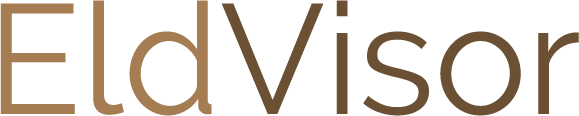
<style>
.page{position:relative;width:579px;height:116px;background:#ffffff}
.page>*{position:absolute;margin:0}
.t1{font:155px "Raleway-Regular";color:#6c5034}
.t2{font:155px "Raleway-Regular";color:#a67c52}
</style>
<div class="page">
<p class="t1" style="left:0px;top:0px;width:579px;height:116px"><span class="t2">Eld</span>Visor</p>
</div>
